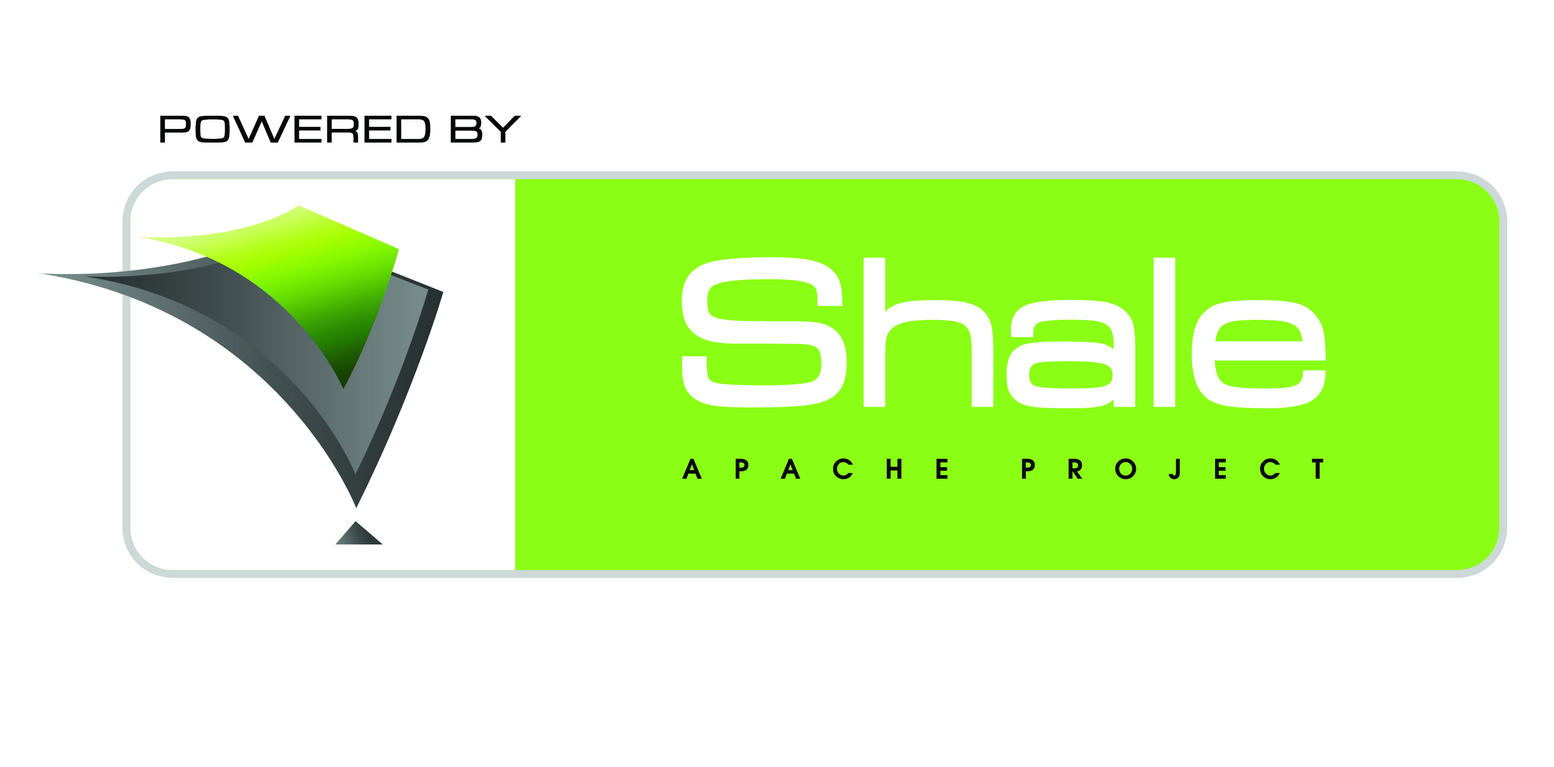
<style>
.page{position:relative;width:1554px;height:767px;background:#ffffff}
.page>*{position:absolute;margin:0}
.t1{font:39.5px "MicrogrammaD-MediExte";letter-spacing:0.075em;color:#060808;font-weight:bold}
.t2{font:215.4px "MicrogrammaD-MediExte";letter-spacing:0.004em;color:#ffffff;font-weight:bold}
.t3{font:26.6px "AvantGarde-Demi";letter-spacing:1.2em;color:#060808}
</style>
<div class="page">
<p class="t1" style="left:160px;top:116px;width:361px;height:27px">POWERED BY</p>
<p class="t2" style="left:682px;top:257px;width:644px;height:151px">Shale</p>
<p class="t3" style="left:682px;top:458px;width:642px;height:21px">APACHE PROJECT</p>
</div>
